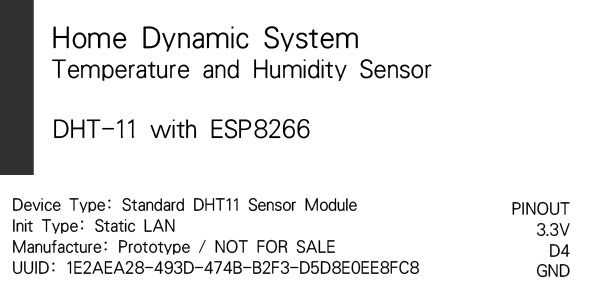
<style>
.page{position:relative;width:591px;height:295px;background:#ffffff}
.page>*{position:absolute;margin:0}
.t1{font:25px/33.3px "HanWangHeiLight";color:#030000}
.t2{font:29.2px/33.3px "HanWangHeiLight";color:#030000}
.t3{font:25px "HanWangHeiLight";color:#030000}
.t4{font:16.7px/20.8px "HanWangHeiLight";color:#030000}
</style>
<div class="page">
<p class="t1" style="left:52px;top:26px;width:380px;height:55px"><span class="t2">Home Dynamic System<br></span>Temperature and Humidity Sensor</p>
<p class="t3" style="left:54px;top:118px;width:256px;height:21px">DHT-11 with ESP8266</p>
<p class="t4" style="left:13px;top:198px;width:407px;height:77px">Device Type: Standard DHT11 Sensor Module<br>Init Type: Static LAN<br>Manufacture: Prototype / NOT FOR SALE<br>UUID: 1E2AEA28-493D-474B-B2F3-D5D8E0EE8FC8</p>
<p class="t4" style="left:512px;top:201px;width:58px;height:77px;text-align:right">PINOUT<br>3.3V<br>D4<br>GND</p>
</div>
